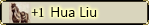
<style>
.page{position:relative;width:149px;height:25px;background:#d9d5bd}
.page>*{position:absolute;margin:0}
.t1{font:14px "LaoUI";color:#000000}
</style>
<div class="page">
<p class="t1" style="left:51px;top:7px;width:46px;height:10px">Hua Liu</p>
</div>
